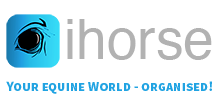
<style>
.page{position:relative;width:215px;height:98px;background:#ffffff}
.page>*{position:absolute;margin:0}
.t1{font:55.1px "Helvetica";color:#b2b2b2}
.t2{font:14px "SourceSansPro-Bold";color:#21a3e2;font-variant:small-caps}
</style>
<div class="page">
<p class="t1" style="left:67px;top:19px;width:145px;height:41px">ihorse</p>
<p class="t2" style="left:6px;top:81px;width:206px;height:13px">Your equine World - organised!</p>
</div>
